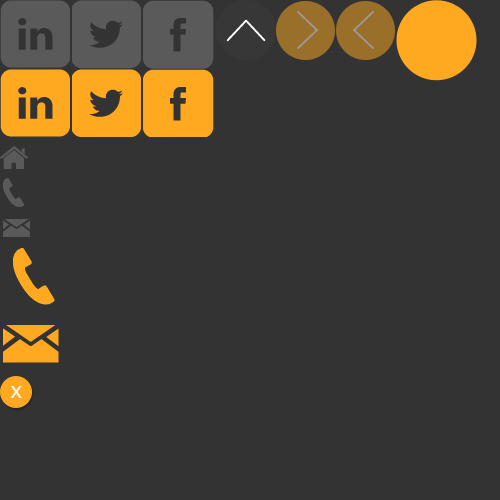
<style>
.page{position:relative;width:500px;height:500px;background:#333333}
.page>*{position:absolute;margin:0}
.t1{font:24px "PTSans-Regular";color:#ffffff}
</style>
<div class="page">
<p class="t1" style="left:10px;top:386px;width:12px;height:12px">x</p>
</div>
